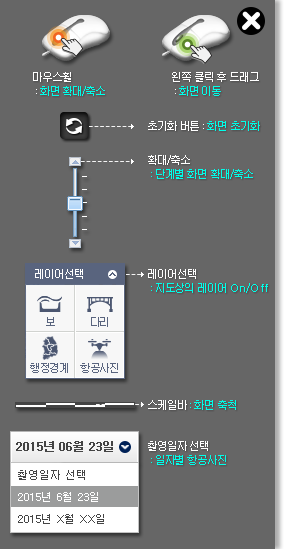
<style>
.page{position:relative;width:285px;height:549px;background:#666666}
.page>*{position:absolute;margin:0}
.t1{font:11px "Dotum";letter-spacing:-0.1em;color:#00ffea}
.t2{font:11px "Dotum";letter-spacing:-0.1em;color:#ffffff}
.t3{font:11px "Dotum";letter-spacing:0.02em;color:#00ffea}
.t4{font:12.3px "Dotum";color:#444444;font-weight:bold}
.t5{font:12.3px "Dotum";letter-spacing:-0.1em;color:#444444;font-weight:bold}
.t6{font:11px/22px "Dotum";color:#ffffff}
.t7{font:11px/22px "Dotum";color:#444444}
</style>
<div class="page">
<p class="t1" style="left:33px;top:72px;width:72px;height:24px"><span class="t2">마우스휠<br> : </span>화면 확대/축소</p>
<p class="t2" style="left:172px;top:72px;width:87px;height:24px">왼쪽 클릭 후 드래그<br> : <span class="t1">화면 이동</span></p>
<p class="t2" style="left:148px;top:121px;width:112px;height:10px">초기화 버튼 : <span class="t1">화면 초기화</span></p>
<p class="t1" style="left:148px;top:155px;width:105px;height:24px"><span class="t2">확대/축소<br></span> : 단계별 화면 확대/축소</p>
<p class="t1" style="left:148px;top:269px;width:120px;height:24px"><span class="t2">레이어선택<br></span> : 지도상의 레이어 <span class="t3">On/Off</span></p>
<p class="t1" style="left:148px;top:400px;width:88px;height:10px"><span class="t2">스케일바</span> : 화면 축척</p>
<p class="t4" style="left:16px;top:441px;width:97px;height:11px">2015<span class="t5">년 </span>06<span class="t5">월 </span>23<span class="t5">일</span></p>
<p class="t1" style="left:148px;top:441px;width:78px;height:24px"><span class="t2">촬영일자 선택 <br></span> : 일자별 항공사진</p>
<p class="t6" style="left:18px;top:470px;width:86px;height:54px"><span class="t7">촬영일자 선택<br></span>2015년 6월 23일<br><span class="t7">2015년 X월 XX일</span></p>
</div>
